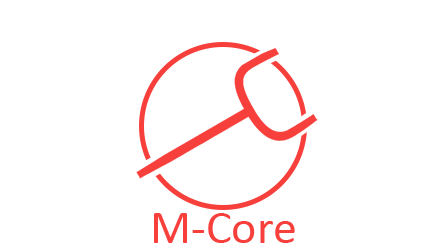
<style>
.page{position:relative;width:445px;height:251px;background:#ffffff}
.page>*{position:absolute;margin:0}
.t1{font:48px "Calibri";color:#f7403c}
</style>
<div class="page">
<p class="t1" style="left:154px;top:213px;width:141px;height:30px">M-Core</p>
</div>
